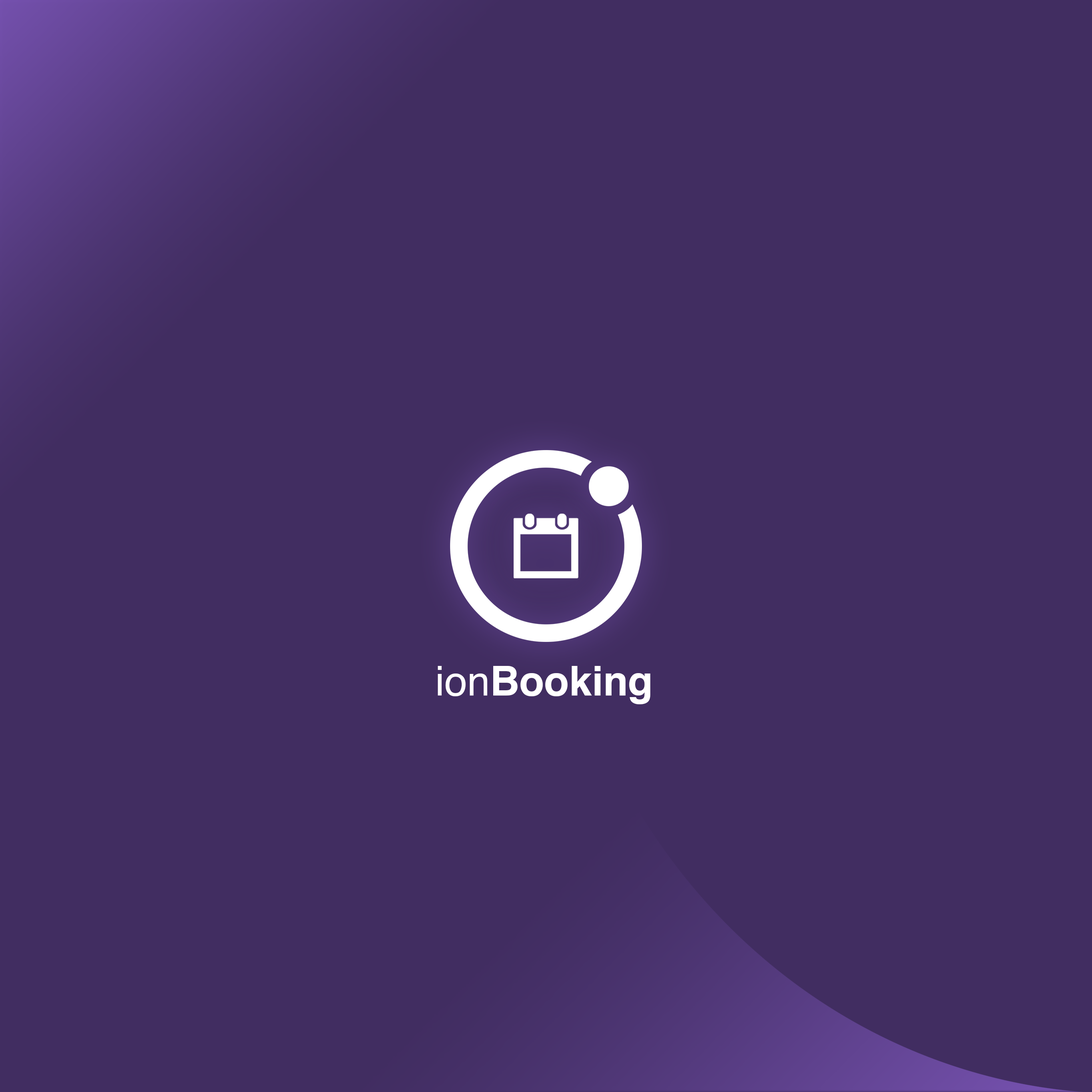
<style>
.page{position:relative;width:1092px;height:1092px;background:#412d61}
.page>*{position:absolute;margin:0}
.t1{font:40.8px "Helvetica-Bold";color:#ffffff}
.t2{font:40.8px "Helvetica";color:#ffffff}
</style>
<div class="page">
<p class="t1" style="left:438px;top:666px;width:212px;height:38px"><span class="t2">ion</span>Booking</p>
</div>
